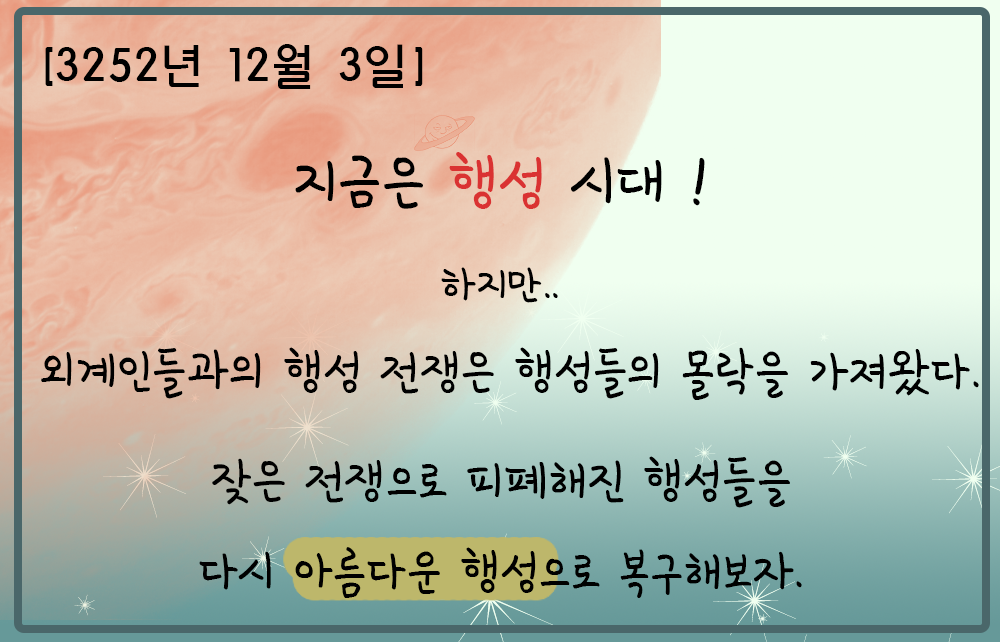
<style>
.page{position:relative;width:1000px;height:642px}
.page>*{position:absolute;margin:0}
.t1{font:50px "HYkanB";color:#000000}
.t2{font:83.3px "SDMiSaeng";color:#000000}
.t3{font:83.3px "SDMiSaeng";color:#da3232}
.t4{font:58.3px "SDMiSaeng";color:#000000}
.t5{font:66.7px "SDMiSaeng";color:#000000}
</style>
<div class="page">
<p class="t1" style="left:45px;top:44px;width:378px;height:45px">[3252년 12월 3일]</p>
<p class="t2" style="left:295px;top:152px;width:410px;height:57px">지금은 <span class="t3">행성 </span>시대 !</p>
<p class="t4" style="left:441px;top:267px;width:117px;height:36px">하지만..</p>
<p class="t5" style="left:41px;top:347px;width:938px;height:53px">외계인들과의 행성 전쟁은 행성들의 몰락을 가져왔다.</p>
<p class="t5" style="left:212px;top:456px;width:578px;height:52px">잦은 전쟁으로 피폐해진 행성들을</p>
<p class="t5" style="left:199px;top:547px;width:603px;height:51px">다시 아름다운 행성으로 복구해보자.</p>
</div>
